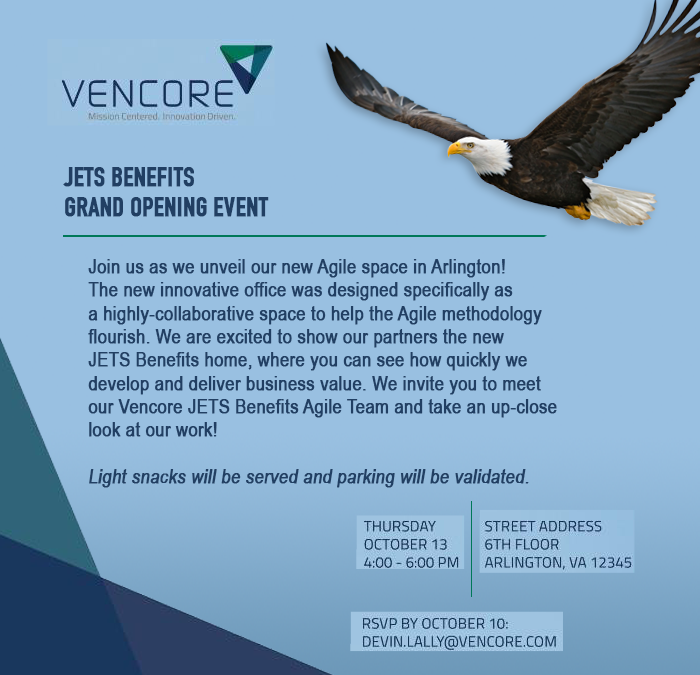
<style>
.page{position:relative;width:700px;height:675px;background:#99c0e1}
.page>*{position:absolute;margin:0}
.t1{font:26.7px/30px "DINCondensed-Bold";color:#213f63;font-weight:bold}
.t2{font:20px/23.3px "ArialNarrow";color:#213f63;font-weight:bold}
.t3{font:20px/23.3px "ArialNarrow-Italic";color:#213f63;font-weight:bold}
</style>
<div class="page">
<p class="t1" style="left:63px;top:167px;width:206px;height:50px">JETS BENEFITS<br>GRAND OPENING EVENT</p>
<p class="t2" style="left:88px;top:259px;width:469px;height:229px">Join us as we unveil our new Agile space in Arlington!<br>The new innovative office was designed specifically as <br>a highly-collaborative space to help the Agile methodology <br>flourish. We are excited to show our partners the new <br>JETS Benefits home, where you can see how quickly we <br>develop and deliver business value. We invite you to meet <br>our Vencore JETS Benefits Agile Team and take an up-close <br>look at our work!<br><br><span class="t3">Light snacks will be served and parking will be validated.</span></p>
</div>
